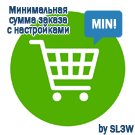
<style>
.page{position:relative;width:135px;height:135px;background:#ffffff}
.page>*{position:absolute;margin:0}
.t1{font:10.8px/10px "FranklinGothic-Medium";color:#1d4971;font-weight:bold;scale:0.83 1}
.t2{font:14.4px "FranklinGothic-Medium";color:#ffffff;font-weight:bold;scale:0.83 1}
.t3{font:10.8px "FranklinGothic-Medium";color:#1d4971;font-weight:bold;scale:0.83 1}
</style>
<div class="page">
<p class="t1" style="left:7px;top:6px;width:62px;height:30px;text-align:center">Минимальная<br>сумма заказа<br>с настройками</p>
<p class="t2" style="left:92px;top:19px;width:25px;height:10px">MIN!</p>
<p class="t3" style="left:98px;top:124px;width:36px;height:11px">by SL3W</p>
</div>
